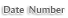
<style>
.page{position:relative;width:68px;height:18px;background:#ffffff}
.page>*{position:absolute;margin:0}
.t1{font:10px "AmiraParadiso";color:#646464}
</style>
<div class="page">
<p class="t1" style="left:3px;top:6px;width:62px;height:7px">Date  Number</p>
</div>
